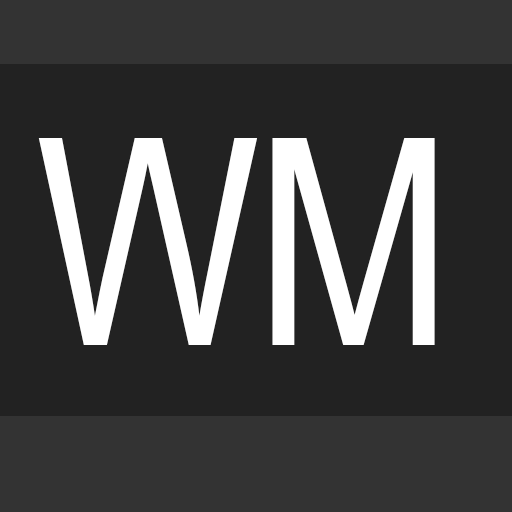
<style>
.page{position:relative;width:512px;height:512px;background:#222222}
.page>*{position:absolute;margin:0}
.t1{font:289.3px "ArialMT";letter-spacing:-0.02em;color:#ffffff;scale:0.82 1}
</style>
<div class="page">
<p class="t1" style="left:38px;top:138px;width:397px;height:207px">WM</p>
</div>
